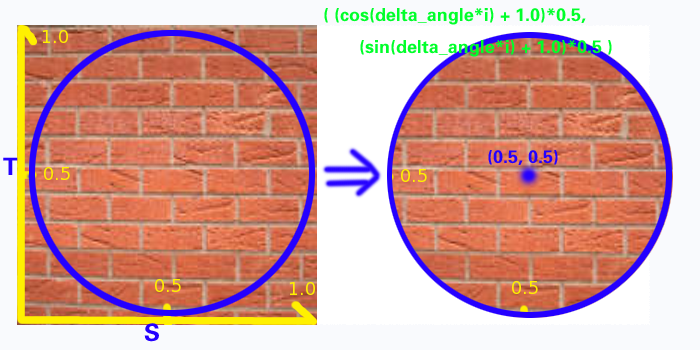
<style>
.page{position:relative;width:700px;height:350px;background:#f9fafd}
.page>*{position:absolute;margin:0}
.t1{font:18px "FZZYJW--GB1-0";color:#00ff2a}
.t2{font:18px "FZZYJW--GB1-0";color:#2400ff}
.t3{font:24px "FZZYJW--GB1-0";color:#2400ff}
</style>
<div class="page">
<p class="t1" style="left:324px;top:8px;width:288px;height:49px">( (cos(delta_angle*i) + 1.0)*0.5,<br> (sin(delta_angle*i) + 1.0)*0.5 )</p>
<p class="t2" style="left:488px;top:150px;width:70px;height:15px">(0.5, 0.5)</p>
<p class="t3" style="left:3px;top:157px;width:15px;height:18px">T</p>
<p class="t3" style="left:144px;top:323px;width:15px;height:19px">S</p>
</div>
